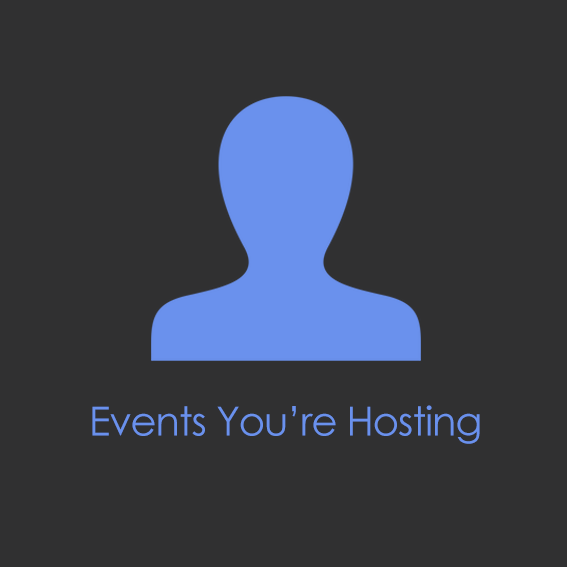
<style>
.page{position:relative;width:567px;height:567px;background:#303031}
.page>*{position:absolute;margin:0}
.t1{font:40px "CenturyGothic";letter-spacing:-0.025em;color:#6a91ed}
</style>
<div class="page">
<p class="t1" style="left:92px;top:405px;width:388px;height:39px">Events You’re Hosting</p>
</div>
